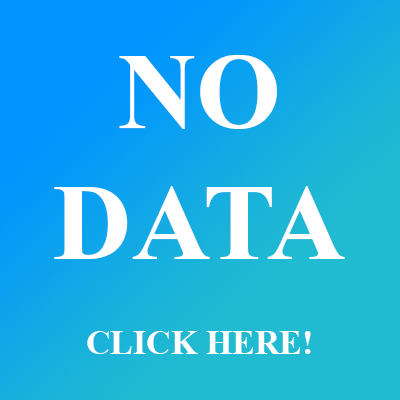
<style>
.page{position:relative;width:400px;height:400px}
.page>*{position:absolute;margin:0}
.t1{font:33.9px "TimesNewRomanPS-BoldMT";color:#ffffff}
.t2{font:108.9px "TimesNewRomanPS-BoldMT";color:#ffffff}
</style>
<div class="page">
<p class="t1" style="left:54px;top:55px;width:291px;height:299px;text-align:center"><span class="t2">NO<br>DATA<br><br></span>CLICK HERE!</p>
</div>
